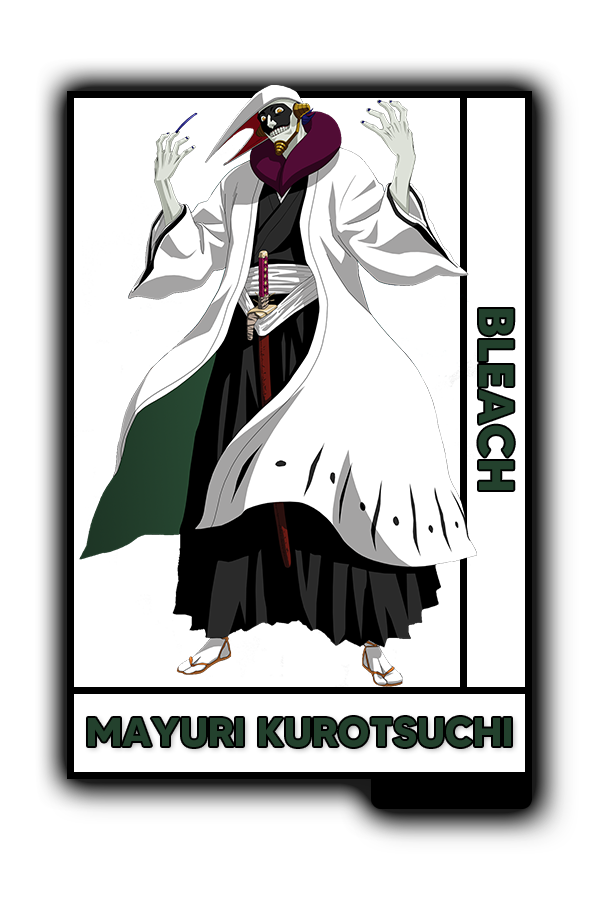
<style>
.page{position:relative;width:600px;height:900px;background:#ffffff}
.page>*{position:absolute;margin:0}
.t1{font:48.8px "MADETOMMY-Bold";color:#23412d}
.t2{font:40.5px "MADETOMMY-Bold";color:#23412d}
</style>
<div class="page">
<p class="t1" style="left:478px;top:309px;width:36px;height:181px;rotate:90deg">BLEACH</p>
<p class="t2" style="left:88px;top:717px;width:423px;height:30px">MAYURI KUROTSUCHI</p>
</div>
